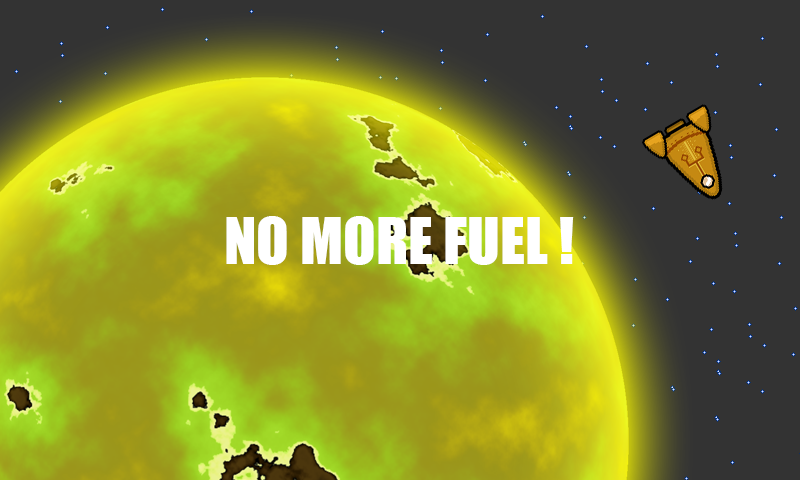
<style>
.page{position:relative;width:800px;height:480px;background:#333333}
.page>*{position:absolute;margin:0}
.t1{font:60px "Impact";color:#ffffff}
</style>
<div class="page">
<p class="t1" style="left:226px;top:216px;width:348px;height:49px">NO MORE FUEL !</p>
</div>
